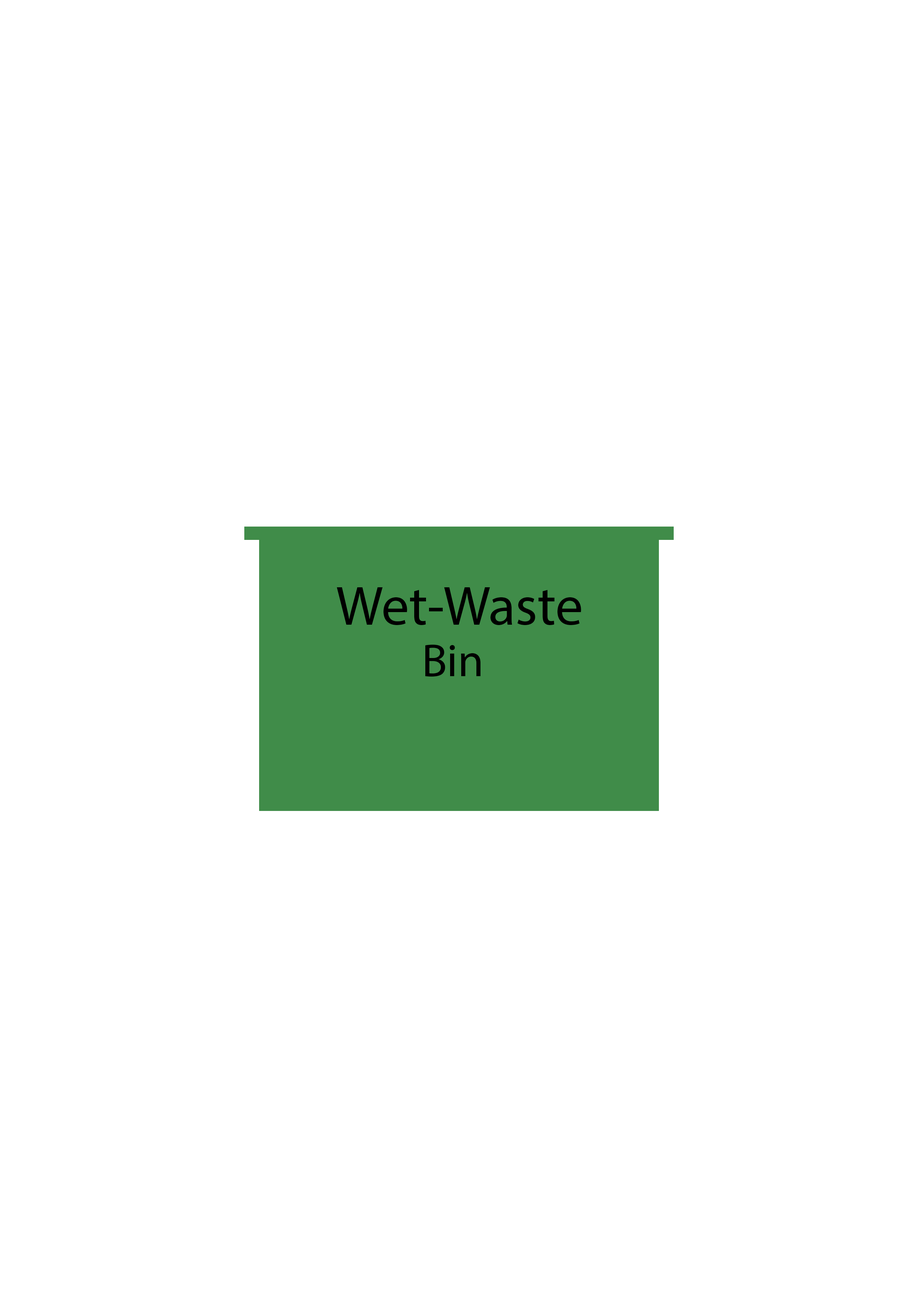
<style>
.page{position:relative;width:918px;height:1299px;background:#ffffff}
.page>*{position:absolute;margin:0}
.t1{font:55.5px "MyriadPro-Regular";color:#000000}
.t2{font:46.3px "MyriadPro-Regular";color:#000000}
</style>
<div class="page">
<p class="t1" style="left:337px;top:587px;width:244px;height:38px">Wet-Waste</p>
<p class="t2" style="left:425px;top:644px;width:56px;height:33px">Bin</p>
</div>
